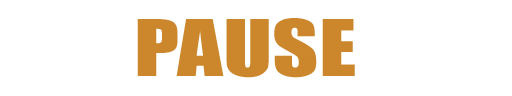
<style>
.page{position:relative;width:512px;height:96px;background:#ffffff}
.page>*{position:absolute;margin:0}
.t1{font:72px "Impact";color:#cc862b;scale:1.25 1}
</style>
<div class="page">
<p class="t1" style="left:137px;top:18px;width:218px;height:60px">PAUSE</p>
</div>
